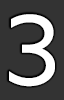
<style>
.page{position:relative;width:64px;height:100px;background:#333333}
.page>*{position:absolute;margin:0}
.t1{font:100px "Amiko-Regular";color:#ffffff}
</style>
<div class="page">
<p class="t1" style="left:9px;top:14px;width:46px;height:73px">3</p>
</div>
